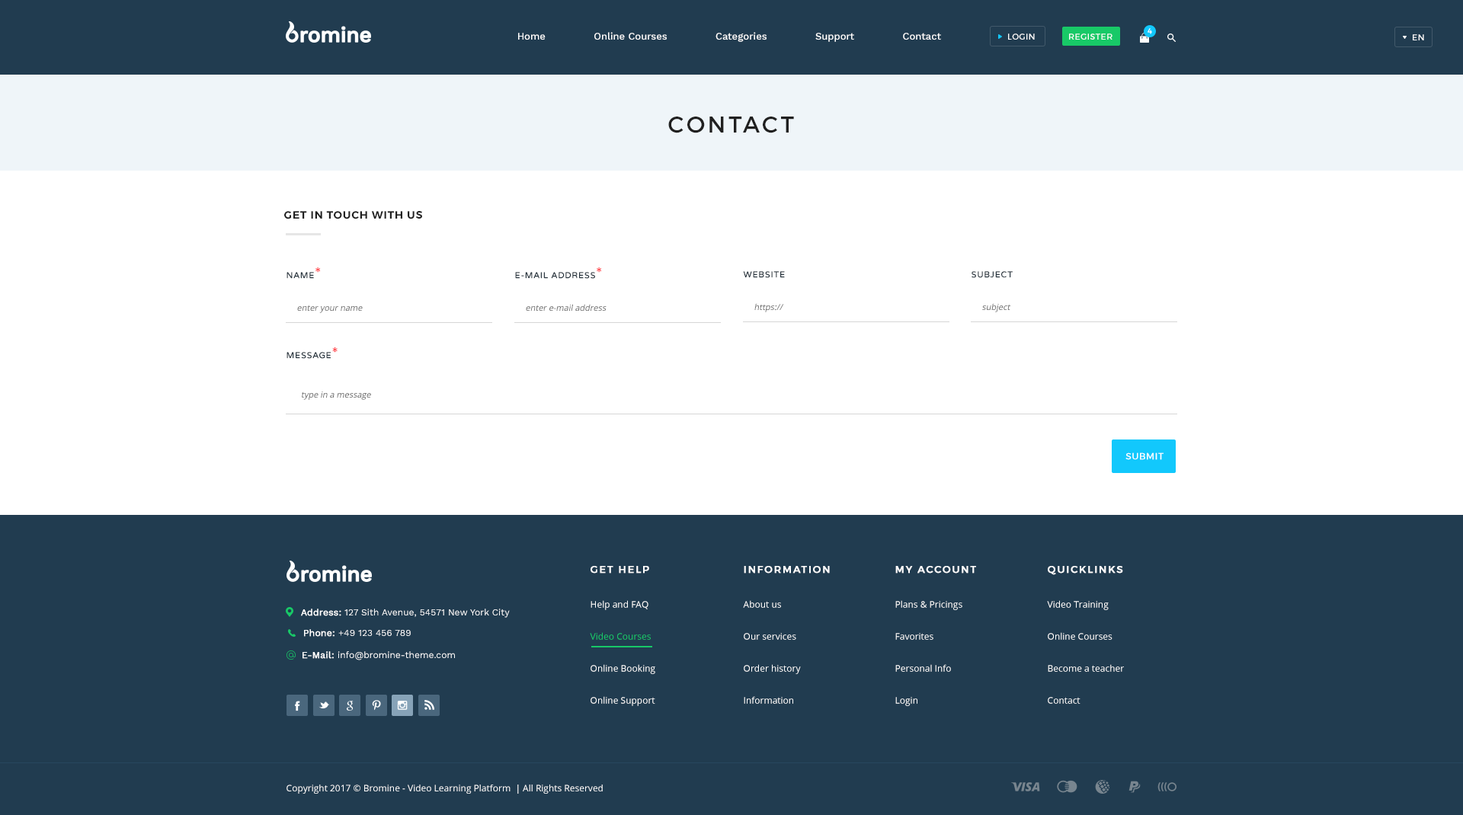
<style>
.page{position:relative;width:1463px;height:815px;background:#213c50}
.page>*{position:absolute;margin:0}
.t1{font:7.6px "Montserrat-Regular";letter-spacing:0.1em;color:#ffffff}
.t2{font:9.9px "WorkSans-Medium";color:#ffffff}
.t3{font:8.4px "Montserrat-Regular";letter-spacing:0.04em;color:#ffffff;text-transform:uppercase}
.t4{font:22.9px "Montserrat-Regular";letter-spacing:0.12em;color:#202020}
.t5{font:10.7px "Montserrat-SemiBold";letter-spacing:0.06em;color:#202020;text-transform:uppercase}
.t6{font:8.4px "VarelaRound";letter-spacing:0.05em;color:#27343e;text-transform:uppercase;font-weight:bold}
.t7{font:15.2px "VarelaRound";letter-spacing:0.05em;color:#ff000c;text-transform:uppercase}
.t8{font:8.4px "OpenSans";color:#5f5f5f;font-style:italic}
.t9{font:8.4px "OpenSans";font-style:italic}
.t10{font:9.1px "Montserrat-Regular";letter-spacing:0.05em;color:#ffffff;text-transform:uppercase}
.t11{font:9.9px "Montserrat-Regular";letter-spacing:0.12em;color:#ffffff;text-transform:uppercase;font-weight:bold}
.t12{font:9.1px/32px "OpenSans";color:#ffffff}
.t13{font:9.1px/32px "OpenSans";color:#18c967}
.t14{font:9.1px "WorkSans-Regular";color:#ffffff}
.t15{font:9.1px "WorkSans-Regular";color:#ffffff;font-weight:bold}
.t16{font:9.1px "OpenSans";color:#ffffff}
</style>
<div class="page">
<p class="t1" style="left:1147px;top:28px;width:5px;height:6px">4</p>
<p class="t2" style="left:518px;top:32px;width:423px;height:10px">Home               Online Courses               Categories               Support               Contact</p>
<p class="t3" style="left:1008px;top:34px;width:27px;height:6px">LOGIN</p>
<p class="t3" style="left:1069px;top:34px;width:43px;height:6px">Register</p>
<p class="t3" style="left:1412px;top:34px;width:12px;height:6px">EN</p>
<p class="t4" style="left:668px;top:117px;width:126px;height:16px">CONTACT</p>
<p class="t5" style="left:284px;top:211px;width:138px;height:8px">GET IN TOUCH WITH US</p>
<p class="t6" style="left:286px;top:267px;width:34px;height:12px">NAME<span class="t7">*</span></p>
<p class="t6" style="left:515px;top:267px;width:86px;height:12px">E-MAIL ADDRESS<span class="t7">*</span></p>
<p class="t6" style="left:743px;top:271px;width:42px;height:7px">Website</p>
<p class="t6" style="left:971px;top:271px;width:42px;height:7px">SUBJECT</p>
<p class="t8" style="left:297px;top:305px;width:66px;height:8px">enter your name</p>
<p class="t8" style="left:526px;top:304px;width:80px;height:7px">enter e-mail address</p>
<p class="t8" style="left:754px;top:303px;width:30px;height:9px">https://</p>
<p class="t9" style="left:982px;top:303px;width:29px;height:9px">subject</p>
<p class="t6" style="left:286px;top:347px;width:52px;height:12px">mESSAGE<span class="t7">*</span></p>
<p class="t8" style="left:302px;top:392px;width:69px;height:8px">type in a message</p>
<p class="t10" style="left:1125px;top:453px;width:38px;height:7px">submit</p>
<p class="t11" style="left:590px;top:566px;width:59px;height:8px">get help</p>
<p class="t11" style="left:744px;top:566px;width:86px;height:8px">Information</p>
<p class="t11" style="left:895px;top:566px;width:81px;height:8px">MY ACCOUNT</p>
<p class="t11" style="left:1048px;top:566px;width:75px;height:9px">quicklinks</p>
<p class="t12" style="left:590px;top:600px;width:65px;height:106px">Help and FAQ<br><span class="t13">Video Courses<br></span>Online Booking<br>Online Support</p>
<p class="t12" style="left:743px;top:600px;width:58px;height:104px">About us<br>Our services<br>Order history<br>Information</p>
<p class="t12" style="left:895px;top:600px;width:67px;height:106px">Plans &amp; Pricings<br>Favorites<br>Personal Info<br>Login</p>
<p class="t12" style="left:1047px;top:600px;width:77px;height:104px">Video Training<br>Online Courses<br>Become a teacher<br>Contact</p>
<p class="t14" style="left:301px;top:609px;width:209px;height:9px"><span class="t15">Address:</span> 127 Sith Avenue, 54571 New York City</p>
<p class="t14" style="left:304px;top:629px;width:107px;height:8px"><span class="t15">Phone: </span>+49 123 456 789</p>
<p class="t14" style="left:302px;top:651px;width:153px;height:10px"><span class="t15">E-Mail: </span>info@bromine-theme.com</p>
<p class="t16" style="left:286px;top:785px;width:317px;height:9px">Copyright 2017 © Bromine - Video Learning Platform  | All Rights Reserved</p>
</div>
